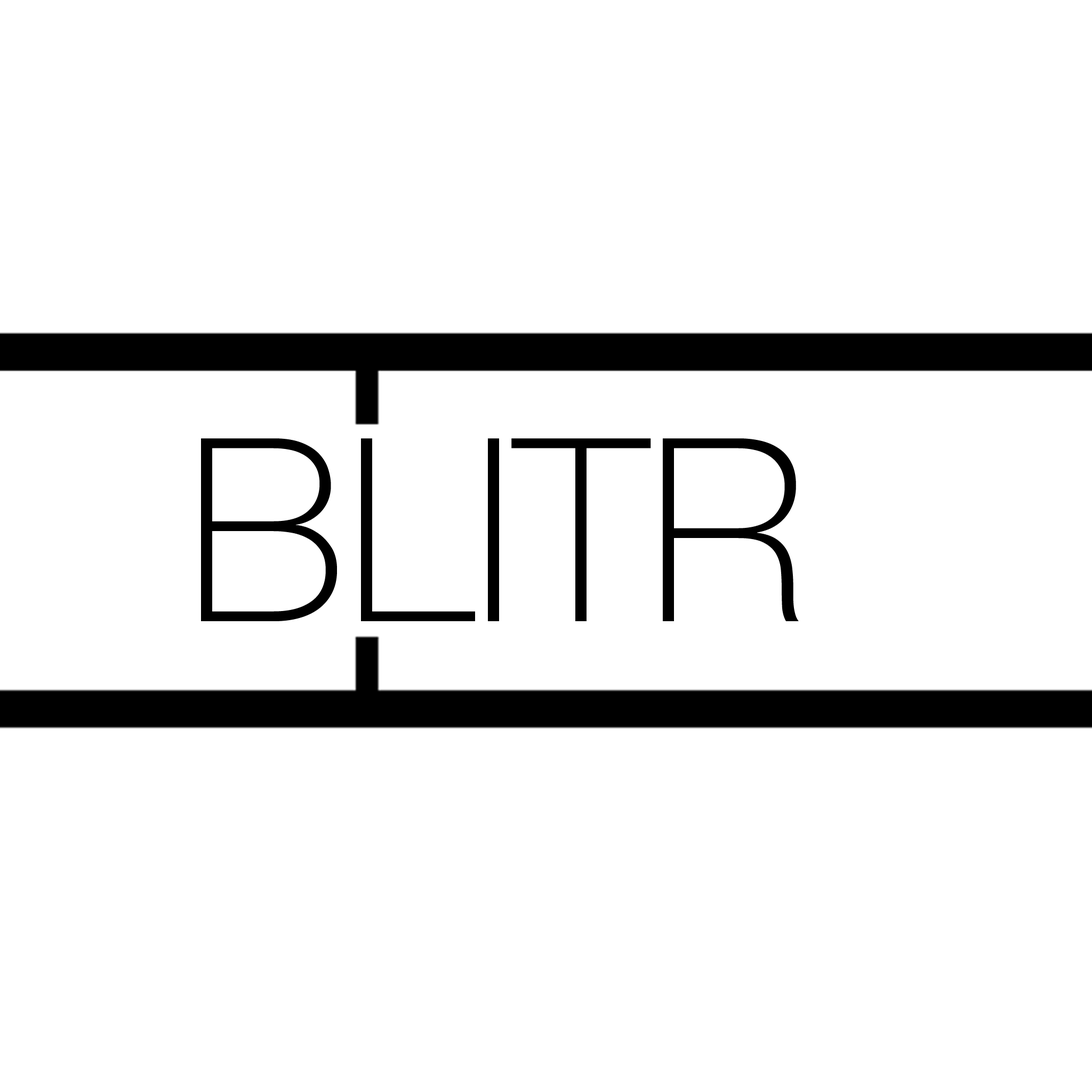
<style>
.page{position:relative;width:1092px;height:1092px;background:#ffffff}
.page>*{position:absolute;margin:0}
.t1{font:255.9px "HelveticaNeue-Thin";color:#000000}
</style>
<div class="page">
<p class="t1" style="left:201px;top:438px;width:598px;height:183px">BLITR</p>
</div>
